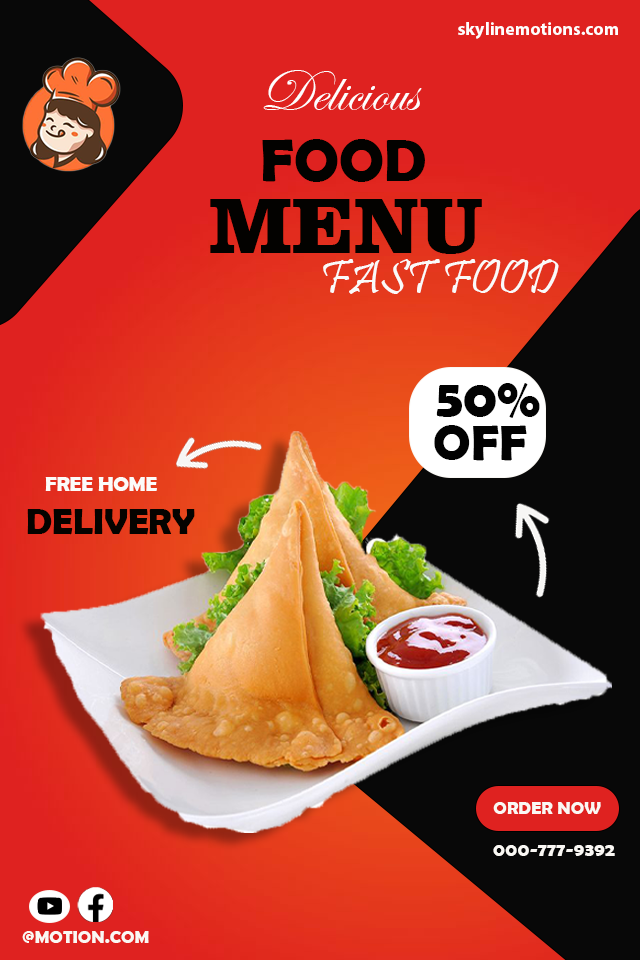
<style>
.page{position:relative;width:640px;height:960px}
.page>*{position:absolute;margin:0}
.t1{font:18px "MyriadPro-Bold";color:#fefefe}
.t2{font:60px "EdwardianScriptITC";color:#fefefe}
.t3{font:60px "EdwardianScriptITC";color:#fefefe;text-transform:uppercase}
.t4{font:60px "BerlinSansFBDemi-Bold";color:#030200;text-transform:uppercase}
.t5{font:80px "ClarendonBT-Black";color:#030200;text-transform:uppercase}
.t6{font:48px "Pristina-Regular";color:#fafaf9;text-transform:uppercase}
.t7{font:53.8px "BerlinSansFBDemi-Bold";color:#020202;text-transform:uppercase}
.t8{font:49.9px "BerlinSansFBDemi-Bold";color:#020202;text-transform:uppercase}
.t9{font:49.9px "BerlinSansFBDemi-Bold";color:#020202}
.t10{font:20.5px "BerlinSansFBDemi-Bold";color:#fcfbf9;text-transform:uppercase}
.t11{font:36.7px "BerlinSansFBDemi-Bold";color:#050300;text-transform:uppercase}
.t12{font:18px "BerlinSansFBDemi-Bold";color:#faf8f4;text-transform:uppercase}
.t13{font:19.3px "BerlinSansFBDemi-Bold";color:#faf8f4;text-transform:uppercase}
</style>
<div class="page">
<p class="t1" style="left:458px;top:22px;width:160px;height:17px">skylinemotions.com</p>
<p class="t2" style="left:263px;top:70px;width:159px;height:40px"><span class="t3">d</span>elicious</p>
<p class="t4" style="left:262px;top:139px;width:163px;height:43px">food</p>
<p class="t5" style="left:210px;top:199px;width:272px;height:55px">menu</p>
<p class="t6" style="left:323px;top:259px;width:236px;height:35px">fast food</p>
<p class="t7" style="left:436px;top:383px;width:104px;height:35px">50%</p>
<p class="t8" style="left:434px;top:425px;width:93px;height:36px"><span class="t9">O</span>FF</p>
<p class="t10" style="left:45px;top:477px;width:112px;height:14px">free home</p>
<p class="t11" style="left:27px;top:509px;width:168px;height:26px">delivery</p>
<p class="t12" style="left:493px;top:802px;width:108px;height:12px">order now</p>
<p class="t13" style="left:493px;top:845px;width:122px;height:11px">000-777-9392</p>
<p class="t12" style="left:22px;top:931px;width:127px;height:12px">@motion.com</p>
</div>
